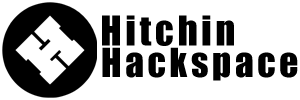
<style>
.page{position:relative;width:300px;height:100px;background:#ffffff}
.page>*{position:absolute;margin:0}
.t1{font:38px "Impact";letter-spacing:0.1em;color:#000000}
.t2{font:37px "Impact";letter-spacing:0.1em;color:#000000}
</style>
<div class="page">
<p class="t1" style="left:102px;top:15px;width:132px;height:31px">Hitchin</p>
<p class="t2" style="left:102px;top:47px;width:196px;height:34px">Hackspace</p>
</div>
